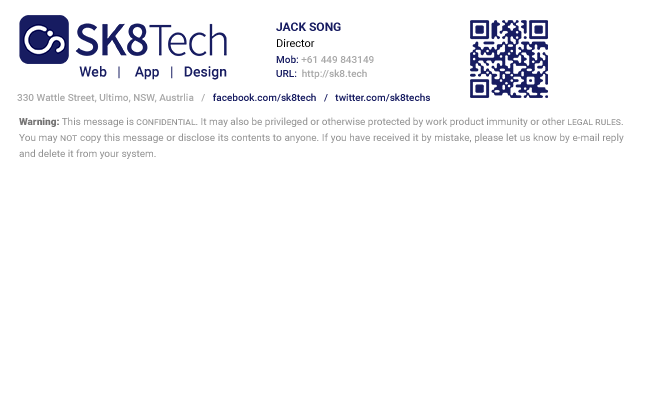
<style>
.page{position:relative;width:650px;height:400px;background:#ffffff}
.page>*{position:absolute;margin:0}
.t1{font:12px/16px "Roboto-Bold";color:#171c61;text-transform:uppercase}
.t2{font:11px/16px "Roboto-Regular";color:#010101}
.t3{font:10px/14px "Roboto-Medium";color:#a9a9a9}
.t4{font:10px/14px "Roboto-Medium";color:#171c61}
.t5{font:14px "Roboto-Medium";color:#171c61}
.t6{font:10px "Roboto-Medium";color:#171c61}
.t7{font:10px "Roboto-Medium";color:#a9a9a9}
.t8{font:10px/16px "Roboto-Regular";color:#919191}
.t9{font:10px/16px "Roboto-Black";color:#757474}
.t10{font:10px/16px "Roboto-Regular";color:#919191;font-variant:small-caps}
</style>
<div class="page">
<p class="t1" style="left:276px;top:22px;width:65px;height:25px">Jack song   <br><span class="t2">Director</span></p>
<p class="t3" style="left:276px;top:55px;width:98px;height:24px"><span class="t4">Mob: </span>+61 449 843149<br><span class="t4">URL:  </span>http://sk8.tech</p>
<p class="t5" style="left:79px;top:66px;width:148px;height:14px">Web   |    App   |   Design</p>
<p class="t6" style="left:17px;top:93px;width:413px;height:10px"><span class="t7">330 Wattle Street, Ultimo, NSW, Austrlia   /   </span>facebook.com/sk8tech   /   twitter.com/sk8techs</p>
<p class="t8" style="left:19px;top:117px;width:605px;height:42px;text-align:justify"><span class="t9">Warning:</span> This message is <span class="t10">confidential</span>. It may also be privileged or otherwise protected by work product immunity or other<span class="t10"> legal rules</span>. You may <span class="t10">not </span>copy this message or disclose its contents to anyone. If you have received it by mistake, please let us know by e-mail reply and delete it from your system.</p>
</div>
